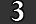
<style>
.page{position:relative;width:36px;height:24px;background:#333333}
.page>*{position:absolute;margin:0}
.t1{font:34px "Perpetua-Bold";color:#ffffff}
</style>
<div class="page">
<p class="t1" style="left:11px;top:1px;width:13px;height:20px">3</p>
</div>
